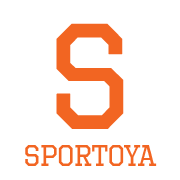
<style>
.page{position:relative;width:180px;height:180px;background:#ffffff}
.page>*{position:absolute;margin:0}
.t1{font:149px "OctinSportsRg-Regular";color:#f26522;font-weight:bold}
.t2{font:30px "OctinSportsRg-Regular";color:#f26522}
</style>
<div class="page">
<p class="t1" style="left:56px;top:23px;width:68px;height:106px">S</p>
<p class="t2" style="left:25px;top:145px;width:132px;height:21px">SPORTOYA</p>
</div>
